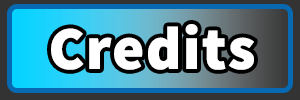
<style>
.page{position:relative;width:300px;height:100px}
.page>*{position:absolute;margin:0}
.t1{font:61px "SourceSansPro-Black";letter-spacing:0.025em;color:#ffffff}
</style>
<div class="page">
<p class="t1" style="left:51px;top:24px;width:203px;height:46px">Credits</p>
</div>
